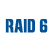
<style>
.page{position:relative;width:50px;height:50px;background:#ffffff}
.page>*{position:absolute;margin:0}
.t1{font:17.6px "Anklepants";color:#035094;font-weight:bold;scale:0.62 1}
</style>
<div class="page">
<p class="t1" style="left:5px;top:19px;width:43px;height:14px">RAID 6</p>
</div>
